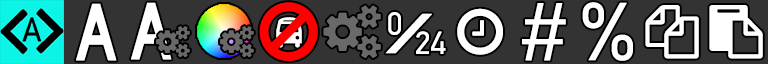
<style>
.page{position:relative;width:768px;height:64px;background:#333333}
.page>*{position:absolute;margin:0}
.t1{font:84px "HighwayGothic";color:#ffffff;font-weight:bold;scale:0.84 1}
.t2{font:85.7px "Gidole-Regular";letter-spacing:-0.64em;color:#ffffff;font-weight:bold}
.t3{font:32.1px "Gidole-Regular";color:#ffffff;font-weight:bold}
.t4{font:32.1px "Gidole-Regular";letter-spacing:-0.64em;color:#ffffff;font-weight:bold}
.t5{font:44px "Gidole-Regular";letter-spacing:-0.16em;color:#ffffff;font-weight:bold;scale:3.44 1}
</style>
<div class="page">
<p class="t1" style="left:76px;top:3px;width:41px;height:58px">A</p>
<p class="t1" style="left:131px;top:2px;width:41px;height:58px">A</p>
<p class="t2" style="left:522px;top:3px;width:44px;height:58px">#</p>
<p class="t2" style="left:582px;top:2px;width:51px;height:59px">%</p>
<p class="t3" style="left:385px;top:12px;width:61px;height:42px"><span class="t4">0</span><span class="t5">/</span>24</p>
</div>
